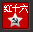
<style>
.page{position:relative;width:33px;height:32px;background:#c50000}
.page>*{position:absolute;margin:0}
.t1{font:10.4px "SimSun";letter-spacing:-0.25em;color:#ffffff}
</style>
<div class="page">
<p class="t1" style="left:4px;top:4px;width:24px;height:9px">红十六</p>
</div>
